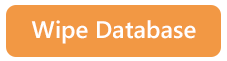
<style>
.page{position:relative;width:227px;height:61px;background:#f29844}
.page>*{position:absolute;margin:0}
.t1{font:23.9px "YuGothicUI-Semibold";color:#ffffff}
</style>
<div class="page">
<p class="t1" style="left:31px;top:20px;width:165px;height:24px">Wipe Database</p>
</div>
